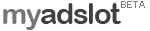
<style>
.page{position:relative;width:150px;height:31px;background:#ffffff}
.page>*{position:absolute;margin:0}
.t1{font:28.8px "ArialRoundedMTBold";letter-spacing:-0.04em;color:#404040}
.t2{font:28.8px "ArialRoundedMTBold";letter-spacing:-0.04em;color:#767676}
.t3{font:10.5px "Tahoma";letter-spacing:0.02em;color:#7f7f7f}
</style>
<div class="page">
<p class="t1" style="left:3px;top:3px;width:118px;height:27px"><span class="t2">my</span>adslot</p>
<p class="t3" style="left:121px;top:1px;width:24px;height:7px">BETA</p>
</div>
